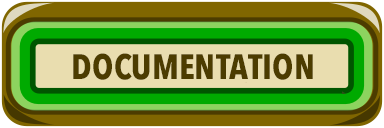
<style>
.page{position:relative;width:384px;height:128px}
.page>*{position:absolute;margin:0}
.t1{font:35px "AvenirNextCondensed-Bold";color:#4c3c00}
</style>
<div class="page">
<p class="t1" style="left:73px;top:53px;width:240px;height:27px">DOCUMENTATION</p>
</div>
